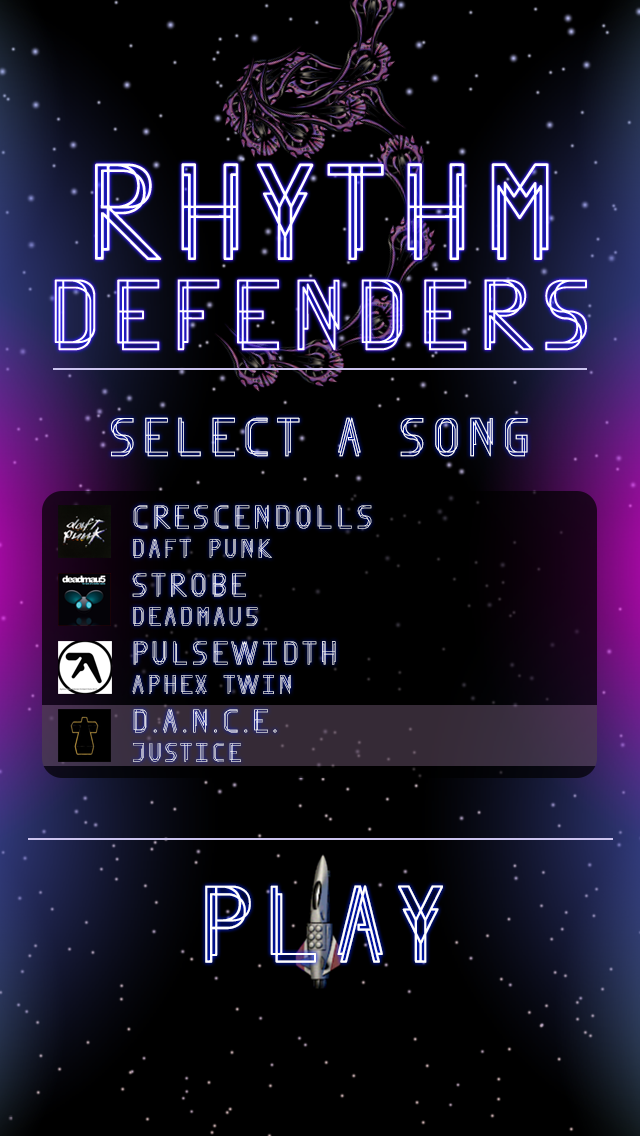
<style>
.page{position:relative;width:640px;height:1136px;background:#000000}
.page>*{position:absolute;margin:0}
.t1{font:60px "Finity";color:#ffffff}
.t2{font:36px "Finity";color:#ffffff}
.t3{font:29px "Finity";color:#ffffff}
.t4{font:29px "Finity"}
.t5{font:120px "Finity";color:#ffffff}
</style>
<div class="page">
<p class="t1" style="left:111px;top:417px;width:417px;height:40px">SELECT A SONG</p>
<p class="t2" style="left:133px;top:505px;width:239px;height:24px">CRESCENDOLLS</p>
<p class="t3" style="left:133px;top:539px;width:139px;height:19px">DAFT PUNK</p>
<p class="t2" style="left:132px;top:573px;width:114px;height:24px">STROBE</p>
<p class="t3" style="left:133px;top:607px;width:125px;height:19px">DEADMAU5</p>
<p class="t2" style="left:133px;top:641px;width:203px;height:24px">PULSEWIDTH</p>
<p class="t4" style="left:132px;top:675px;width:159px;height:19px">APHEX TWIN</p>
<p class="t2" style="left:133px;top:709px;width:144px;height:24px">D.A.N.C.E.</p>
<p class="t4" style="left:133px;top:743px;width:108px;height:19px">JUSTICE</p>
<p class="t5" style="left:205px;top:885px;width:238px;height:78px">PLAY</p>
</div>
